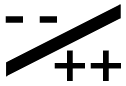
<style>
.page{position:relative;width:126px;height:86px;background:#ffffff}
.page>*{position:absolute;margin:0}
.t1{font:69px "FranklinGothic-Medium";color:#000000}
.t2{font:60.5px "FranklinGothic-Medium";color:#000000}
</style>
<div class="page">
<p class="t1" style="left:5px;top:16px;width:52px;height:7px">- -</p>
<p class="t2" style="left:54px;top:50px;width:67px;height:31px">++</p>
</div>
